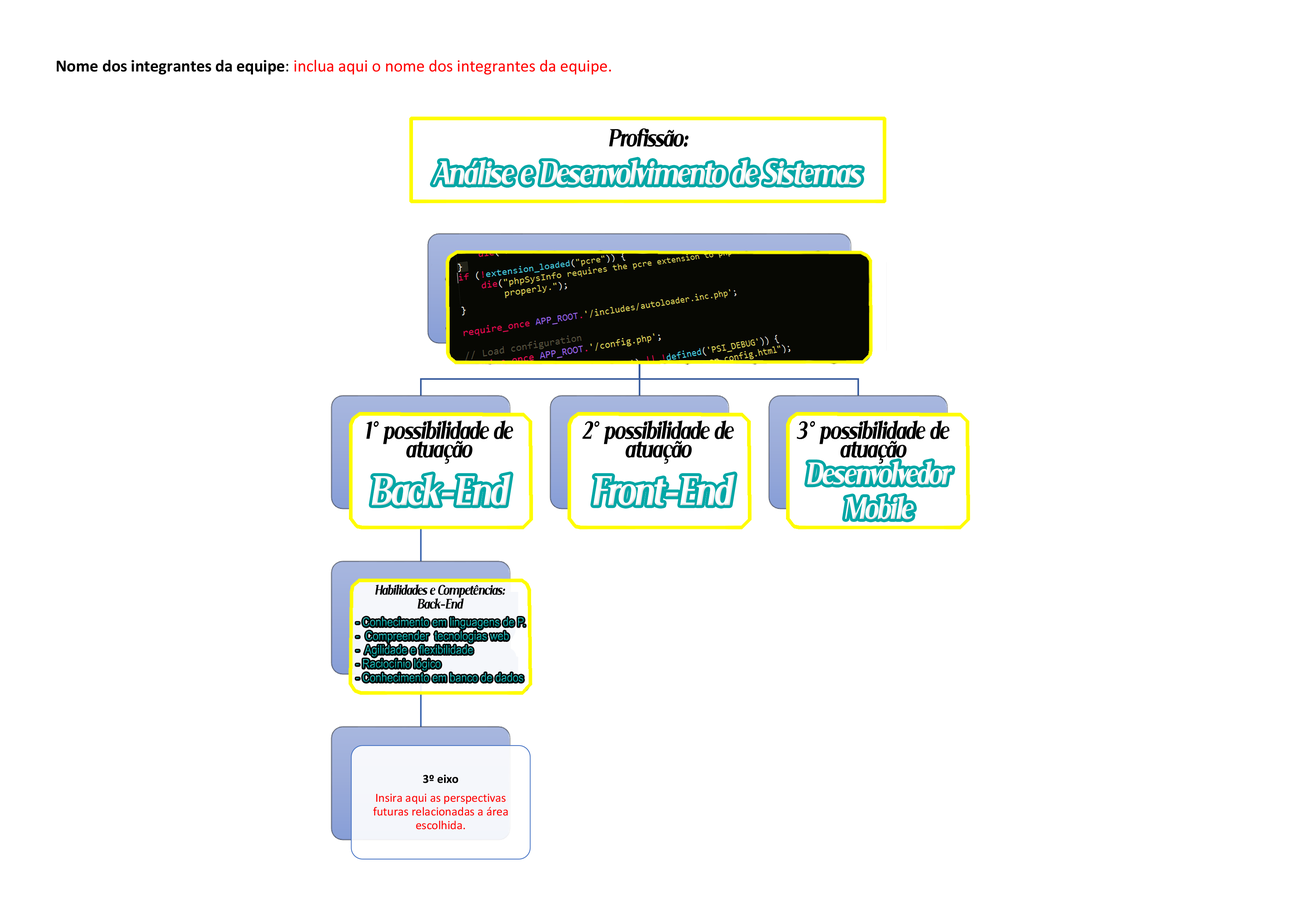
<style>
.page{position:relative;width:1299px;height:918px;background:#ffffff}
.page>*{position:absolute;margin:0}
.t1{font:27.8px "SerifNarrowItalic";color:#000000}
.t2{font:37px "SerifNarrowItalic";color:#ffffff}
.t3{font:34.7px "SerifNarrowItalic";color:#ffffff}
.t4{font:46.3px "SerifNarrowItalic";color:#ffffff}
.t5{font:15.4px "SerifNarrowItalic";color:#000000}
.t6{font:12.3px/13.9px "ArialMT";scale:0.84 1}
</style>
<div class="page">
<p class="t1" style="left:609px;top:128px;width:79px;height:19px">Profissão:</p>
<p class="t2" style="left:432px;top:160px;width:430px;height:25px">Análise e Desenvolvimento de Sistemas</p>
<p class="t1" style="left:366px;top:420px;width:147px;height:44px">1° possibilidade de atuação</p>
<p class="t1" style="left:582px;top:420px;width:152px;height:44px">2° possibilidade de atuação</p>
<p class="t1" style="left:796px;top:420px;width:153px;height:44px">3° possibilidade de atuação</p>
<p class="t3" style="left:807px;top:461px;width:145px;height:58px">Desenvolvedor Mobile</p>
<p class="t4" style="left:371px;top:474px;width:139px;height:32px">Back-End</p>
<p class="t4" style="left:593px;top:474px;width:141px;height:32px">Front-End</p>
<p class="t5" style="left:375px;top:584px;width:130px;height:25px">Habilidades e Competências: Back-End</p>
<p class="t6" style="left:356px;top:617px;width:169px;height:65px">- Conhecimento em linguagens de P.<br>-  Compreender  tecnologias web<br>-  Agilidade e flexibilidade<br>- Raciocínio lógico<br>- Conhecimento em banco de dados</p>
</div>
